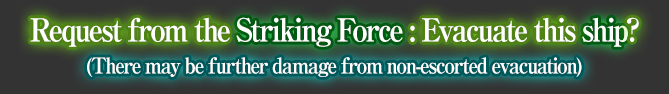
<style>
.page{position:relative;width:669px;height:94px;background:#333333}
.page>*{position:absolute;margin:0}
.t1{font:32px "RyuminPro-ExBold";letter-spacing:-0.08em;color:#ffffff;scale:0.9 1}
.t2{font:22px "RyuminPro-ExBold";letter-spacing:-0.08em;color:#ffffff;scale:0.9 1}
</style>
<div class="page">
<p class="t1" style="left:30px;top:17px;width:609px;height:30px">Request from the Striking Force : Evacuate this ship?</p>
<p class="t1" style="left:30px;top:17px;width:609px;height:30px">Request from the Striking Force : Evacuate this ship?</p>
<p class="t2" style="left:87px;top:57px;width:495px;height:20px">(There may be further damage from non-escorted evacuation)</p>
</div>
